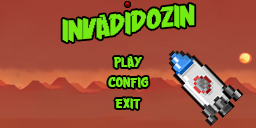
<style>
.page{position:relative;width:256px;height:128px}
.page>*{position:absolute;margin:0}
.t1{font:20px "Crang";letter-spacing:-0.04em;color:#74ec13}
.t2{font:10px "Crang";letter-spacing:-0.04em;color:#74ec13}
</style>
<div class="page">
<p class="t1" style="left:62px;top:4px;width:133px;height:39px">INVADIDOZIN</p>
<p class="t2" style="left:114px;top:56px;width:28px;height:12px">PLAY</p>
<p class="t2" style="left:108px;top:77px;width:41px;height:11px">CONFIG</p>
<p class="t2" style="left:115px;top:98px;width:26px;height:11px">EXIT</p>
</div>
